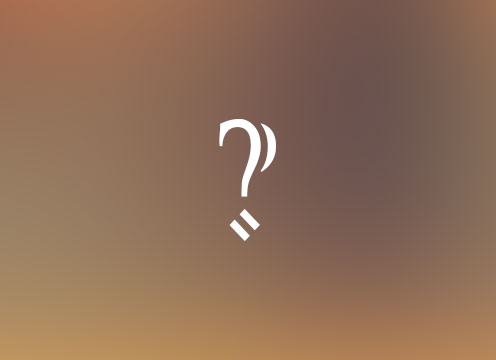
<style>
.page{position:relative;width:496px;height:360px}
.page>*{position:absolute;margin:0}
.t1{font:226.7px "ColonnaMT";color:#ffffff;scale:0.96 1}
</style>
<div class="page">
<p class="t1" style="left:219px;top:119px;width:57px;height:122px">?</p>
</div>
